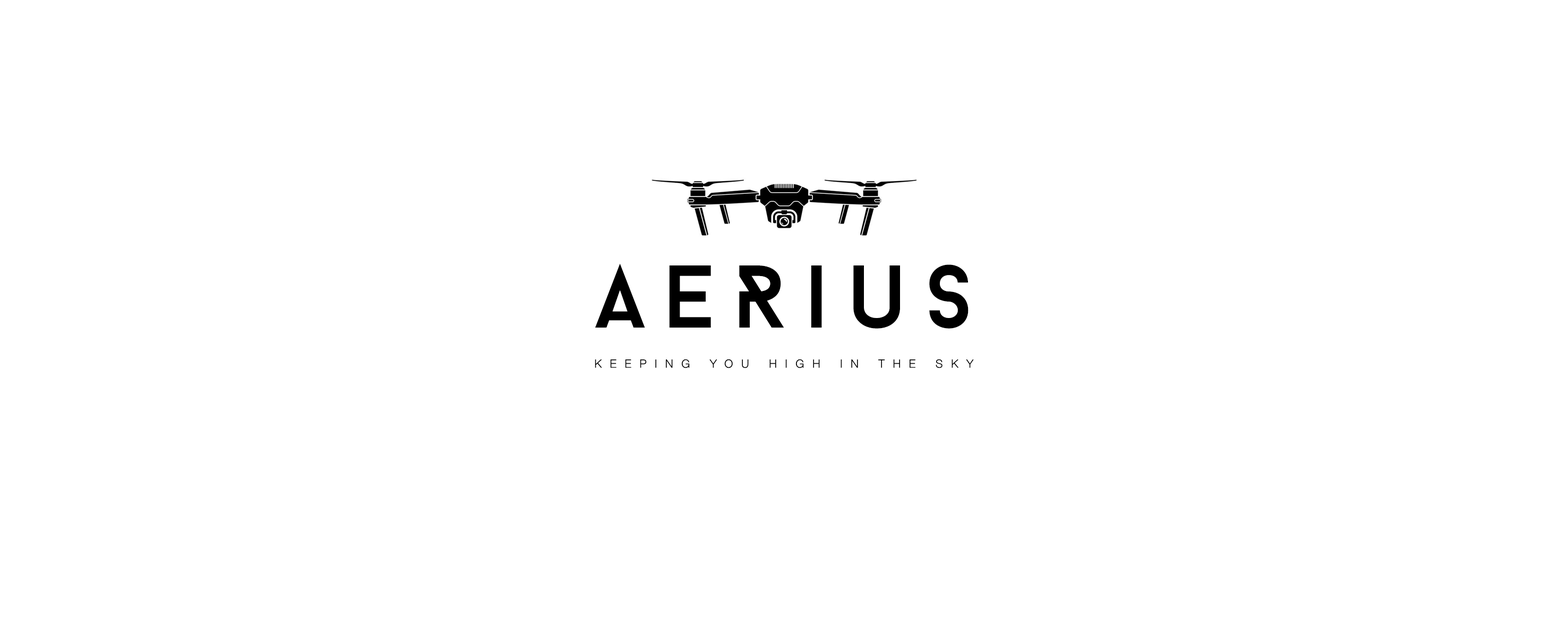
<style>
.page{position:relative;width:1568px;height:627px;background:#ffffff}
.page>*{position:absolute;margin:0}
.t1{font:88.5px "BaronNeue";letter-spacing:0.2em;color:#000000}
.t2{font:11.1px "HelveticaNeue-Thin";letter-spacing:0.75em;color:#010101;text-transform:uppercase;font-weight:bold}
</style>
<div class="page">
<p class="t1" style="left:595px;top:263px;width:374px;height:66px">AERius</p>
<p class="t2" style="left:595px;top:359px;width:379px;height:10px">keeping you high in the sky</p>
</div>
